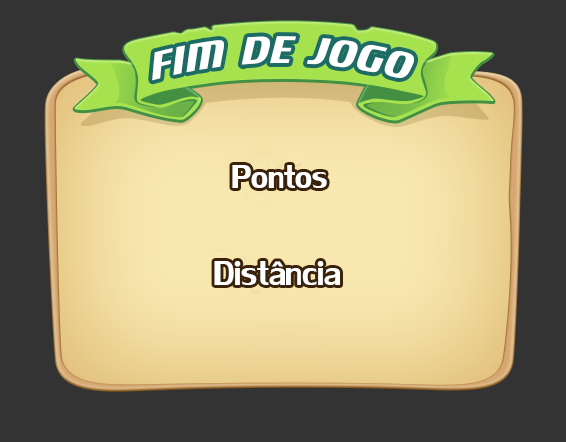
<style>
.page{position:relative;width:566px;height:442px;background:#333333}
.page>*{position:absolute;margin:0}
.t1{font:60.4px "Motorwerk";color:#ffffff;scale:0.79 1}
.t2{font:48.8px "LilyUPC";color:#ffffff}
.t3{font:48.8px "MoolBoran";color:#ffffff}
.t4{font:50.6px "LilyUPC";color:#ffffff}
</style>
<div class="page">
<p class="t1" style="left:152px;top:36px;width:263px;height:45px">FIM DE JOGO</p>
<p class="t2" style="left:232px;top:165px;width:95px;height:23px"><span class="t3"><br></span>Pontos</p>
<p class="t4" style="left:214px;top:261px;width:126px;height:24px">Distância</p>
</div>
